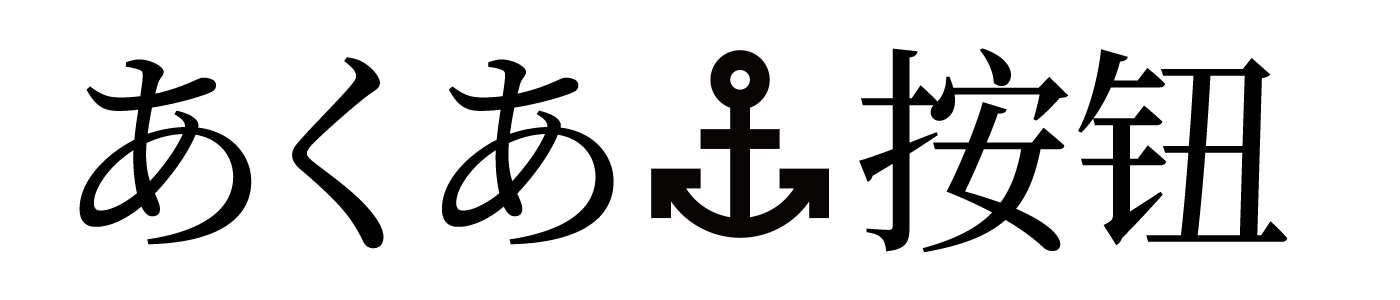
<style>
.page{position:relative;width:1400px;height:300px;background:#ffffff}
.page>*{position:absolute;margin:0}
.t1{font:220px "SourceHanSerifSC-Medium";color:#000000}
</style>
<div class="page">
<p class="t1" style="left:79px;top:48px;width:1209px;height:205px">あくあ    按钮</p>
</div>
